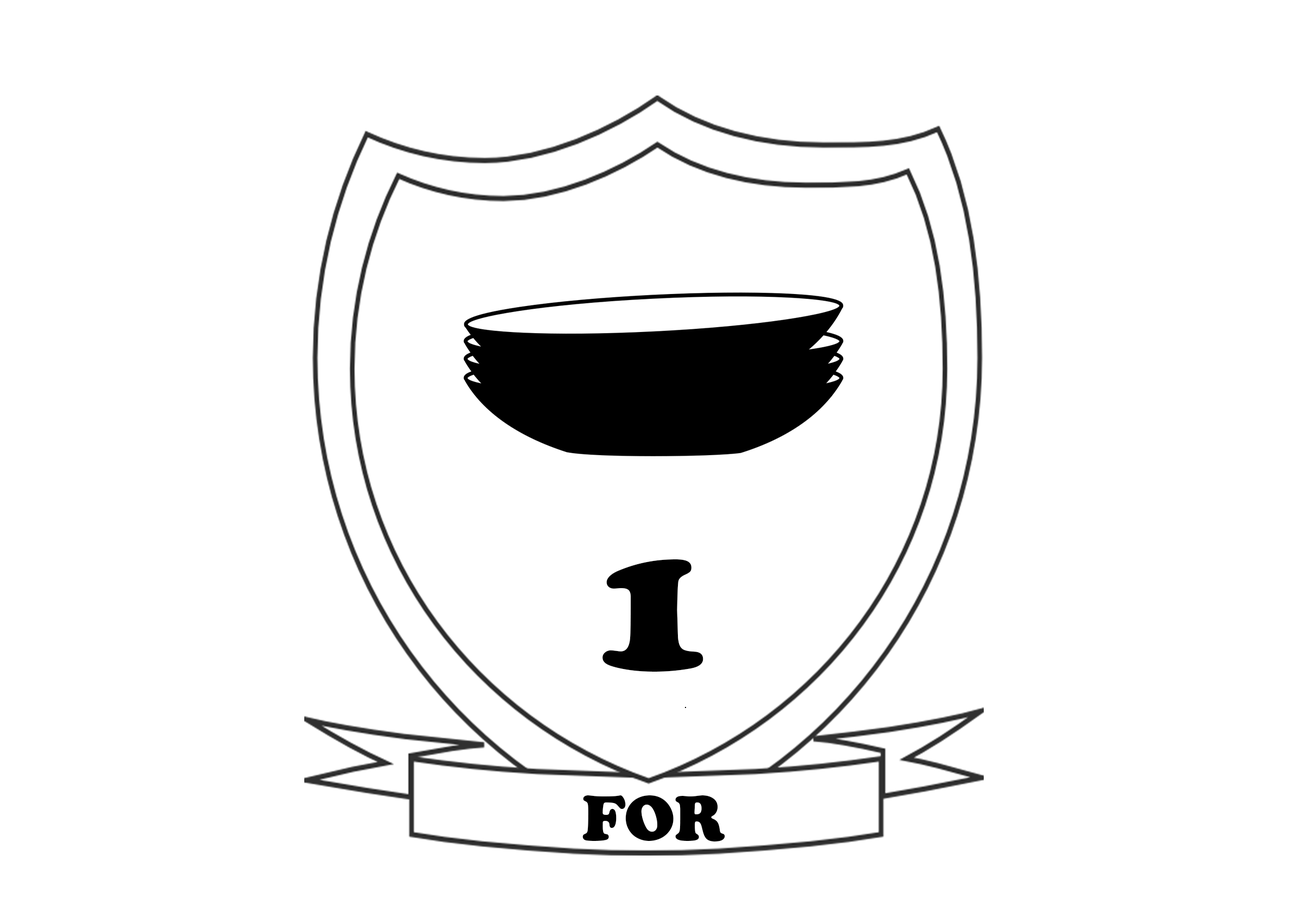
<style>
.page{position:relative;width:1307px;height:912px;background:#ffffff}
.page>*{position:absolute;margin:0}
.t1{font:195.3px "CooperBlack";color:#000000}
.t2{font:65.1px "CooperBlack";color:#000000}
</style>
<div class="page">
<p class="t1" style="left:603px;top:559px;width:101px;height:113px">1</p>
<p class="t2" style="left:583px;top:795px;width:142px;height:46px">FOR</p>
</div>
